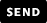
<style>
.page{position:relative;width:47px;height:23px;background:#000000}
.page>*{position:absolute;margin:0}
.t1{font:12px "ObliquaITCStd-Bold";letter-spacing:0.1em;color:#ffffff}
</style>
<div class="page">
<p class="t1" style="left:7px;top:7px;width:33px;height:10px">SEND</p>
</div>
